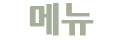
<style>
.page{position:relative;width:122px;height:40px;background:#ffffff}
.page>*{position:absolute;margin:0}
.t1{font:34px "NanumGothicExtraBold";color:#a6ae99;font-weight:bold}
</style>
<div class="page">
<p class="t1" style="left:29px;top:3px;width:65px;height:33px">메뉴</p>
</div>
